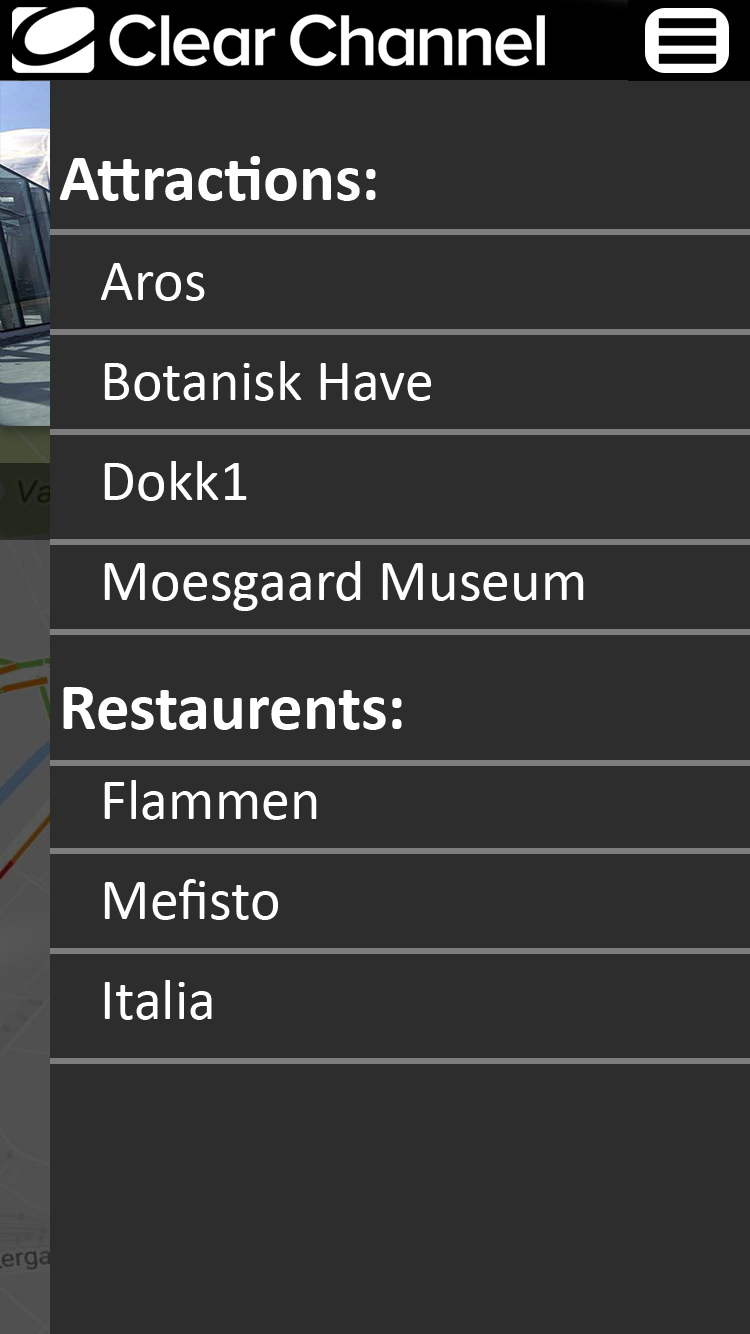
<style>
.page{position:relative;width:750px;height:1334px;background:#2d2d2d}
.page>*{position:absolute;margin:0}
.t1{font:66.7px "Calibri-Bold";color:#ffffff}
.t2{font:58.3px "Calibri";color:#ffffff}
</style>
<div class="page">
<p class="t1" style="left:59px;top:156px;width:317px;height:45px">Attractions:</p>
<p class="t2" style="left:101px;top:263px;width:104px;height:38px">Aros</p>
<p class="t2" style="left:104px;top:361px;width:328px;height:40px">Botanisk Have</p>
<p class="t2" style="left:104px;top:461px;width:143px;height:40px">Dokk1</p>
<p class="t2" style="left:104px;top:561px;width:480px;height:50px">Moesgaard Museum</p>
<p class="t1" style="left:63px;top:687px;width:339px;height:43px">Restaurents:</p>
<p class="t2" style="left:104px;top:780px;width:213px;height:40px">Flammen</p>
<p class="t2" style="left:104px;top:879px;width:174px;height:41px">Mefisto</p>
<p class="t2" style="left:104px;top:980px;width:108px;height:40px">Italia</p>
</div>
